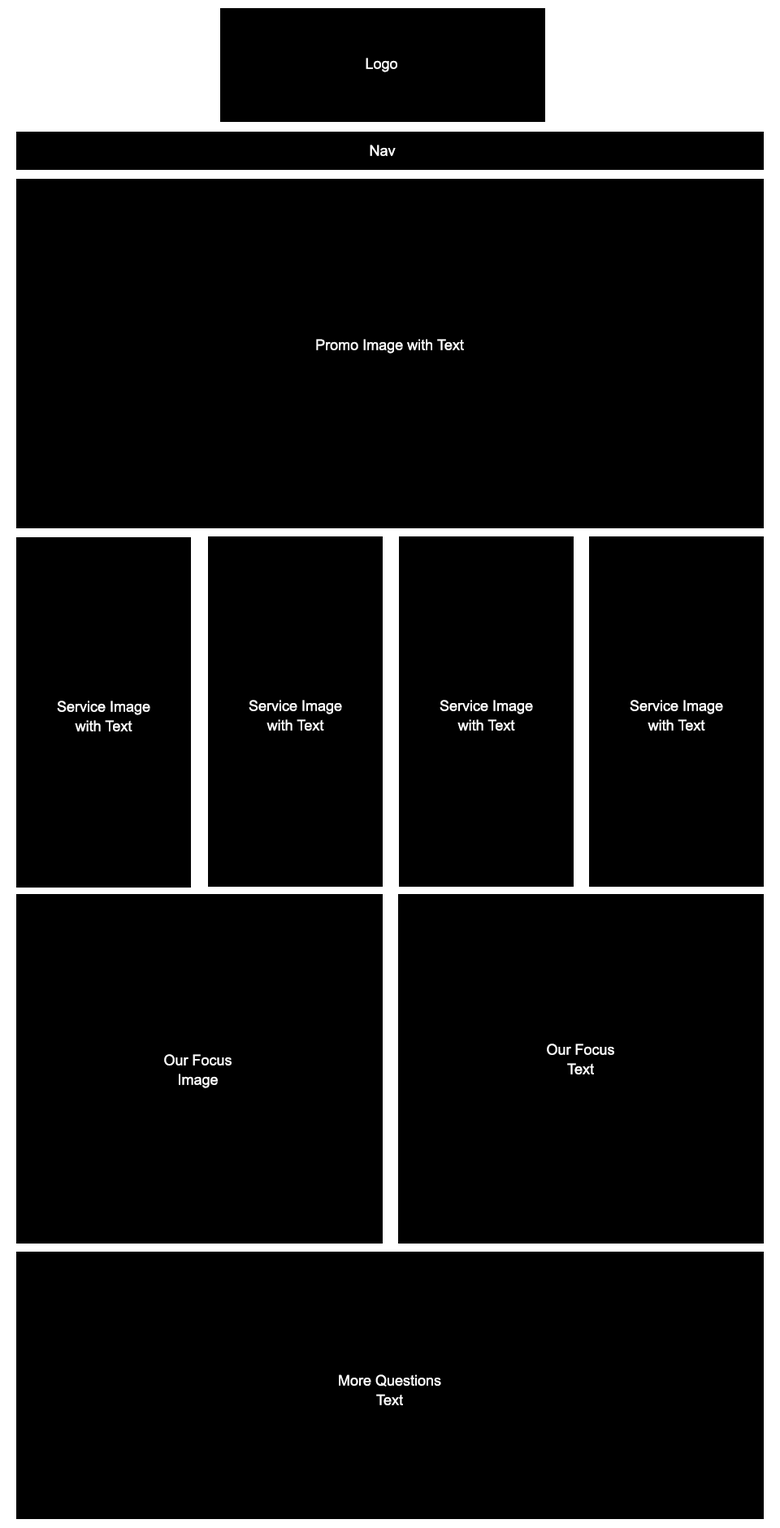
<style>
.page{position:relative;width:780px;height:1528px;background:#000000}
.page>*{position:absolute;margin:0}
.t1{font:14.6px "ArialMT";color:#ffffff}
.t2{font:14.6px/19.5px "ArialMT";color:#ffffff}
</style>
<div class="page">
<p class="t1" style="left:366px;top:58px;width:31px;height:14px">Logo</p>
<p class="t1" style="left:370px;top:145px;width:26px;height:11px">Nav</p>
<p class="t1" style="left:316px;top:339px;width:148px;height:15px">Promo Image with Text</p>
<p class="t2" style="left:57px;top:701px;width:93px;height:31px;text-align:center">Service Image<br>with Text</p>
<p class="t2" style="left:249px;top:700px;width:93px;height:31px;text-align:center">Service Image<br>with Text</p>
<p class="t2" style="left:440px;top:700px;width:93px;height:31px;text-align:center">Service Image<br>with Text</p>
<p class="t2" style="left:630px;top:700px;width:93px;height:31px;text-align:center">Service Image<br>with Text</p>
<p class="t2" style="left:547px;top:1044px;width:68px;height:31px;text-align:center">Our Focus<br>Text</p>
<p class="t2" style="left:164px;top:1054px;width:68px;height:34px;text-align:center">Our Focus<br>Image</p>
<p class="t2" style="left:339px;top:1375px;width:102px;height:30px;text-align:center">More Questions<br>Text</p>
</div>
